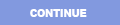
<style>
.page{position:relative;width:120px;height:25px;background:#8299df}
.page>*{position:absolute;margin:0}
.t1{font:18.2px "Arial-Black";color:#ffffff;scale:0.9 1}
</style>
<div class="page">
<p class="t1" style="left:30px;top:9px;width:57px;height:8px">CONTINUE</p>
</div>
